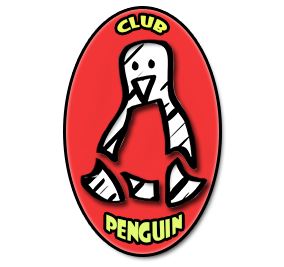
<style>
.page{position:relative;width:284px;height:267px;background:#ffffff}
.page>*{position:absolute;margin:0}
.t1{font:14px "ShowcardGothic-Reg";color:#eefb5e}
.t2{font:18px "ShowcardGothic-Reg";color:#e2fa74}
.t3{font:12px "ShowcardGothic-Reg";color:#e2fa74}
</style>
<div class="page">
<p class="t1" style="left:117px;top:15px;width:50px;height:18px">Club</p>
<p class="t2" style="left:106px;top:214px;width:76px;height:29px"><span class="t3"><br></span>Penguin</p>
</div>
